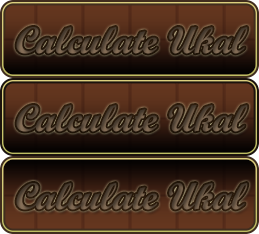
<style>
.page{position:relative;width:259px;height:234px}
.page>*{position:absolute;margin:0}
.t1{font:37.5px "ScriptMTBold";font-style:italic}
</style>
<div class="page">
<p class="t1" style="left:16px;top:27px;width:232px;height:27px">Calculate Ukal</p>
<p class="t1" style="left:16px;top:105px;width:232px;height:27px">Calculate Ukal</p>
<p class="t1" style="left:16px;top:183px;width:232px;height:27px">Calculate Ukal</p>
</div>
